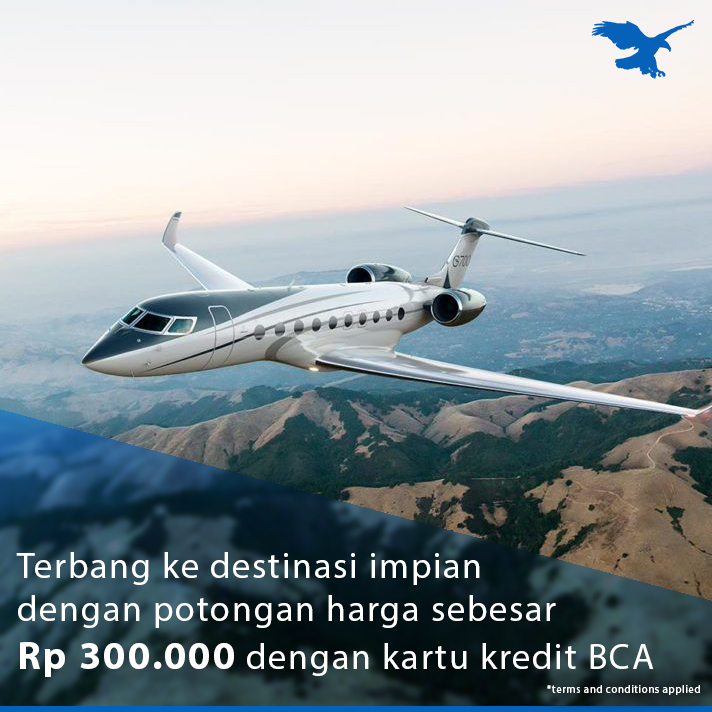
<style>
.page{position:relative;width:712px;height:712px}
.page>*{position:absolute;margin:0}
.t1{font:36px "MyriadPro-Regular";letter-spacing:0.05em;color:#ffffff}
.t2{font:40px "MyriadPro-Bold";letter-spacing:0.05em;color:#ffffff}
.t3{font:11px "MyriadPro-Regular";letter-spacing:0.05em;color:#ffffff}
</style>
<div class="page">
<p class="t1" style="left:16px;top:552px;width:638px;height:125px">Terbang ke destinasi impian <br>dengan potongan harga sebesar <br><span class="t2">Rp 300.000</span> dengan kartu kredit BCA</p>
<p class="t3" style="left:547px;top:685px;width:153px;height:10px">*terms and conditions applied</p>
</div>
